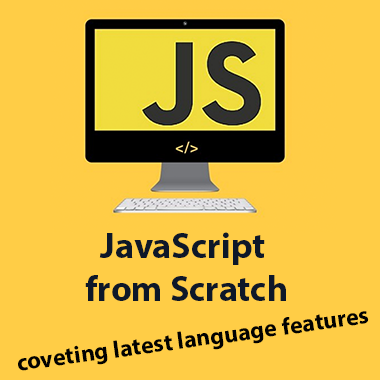
<style>
.page{position:relative;width:380px;height:380px;background:#ffcd46}
.page>*{position:absolute;margin:0}
.t1{font:36px "MyriadPro-Bold";color:#0e1829}
.t2{font:24px "MyriadPro-Bold";color:#020202}
</style>
<div class="page">
<p class="t1" style="left:85px;top:232px;width:201px;height:69px;text-align:center">JavaScript <br>from Scratch</p>
<p class="t2" style="left:18px;top:311px;width:351px;height:60px;rotate:-8deg">coveting latest language features</p>
</div>
